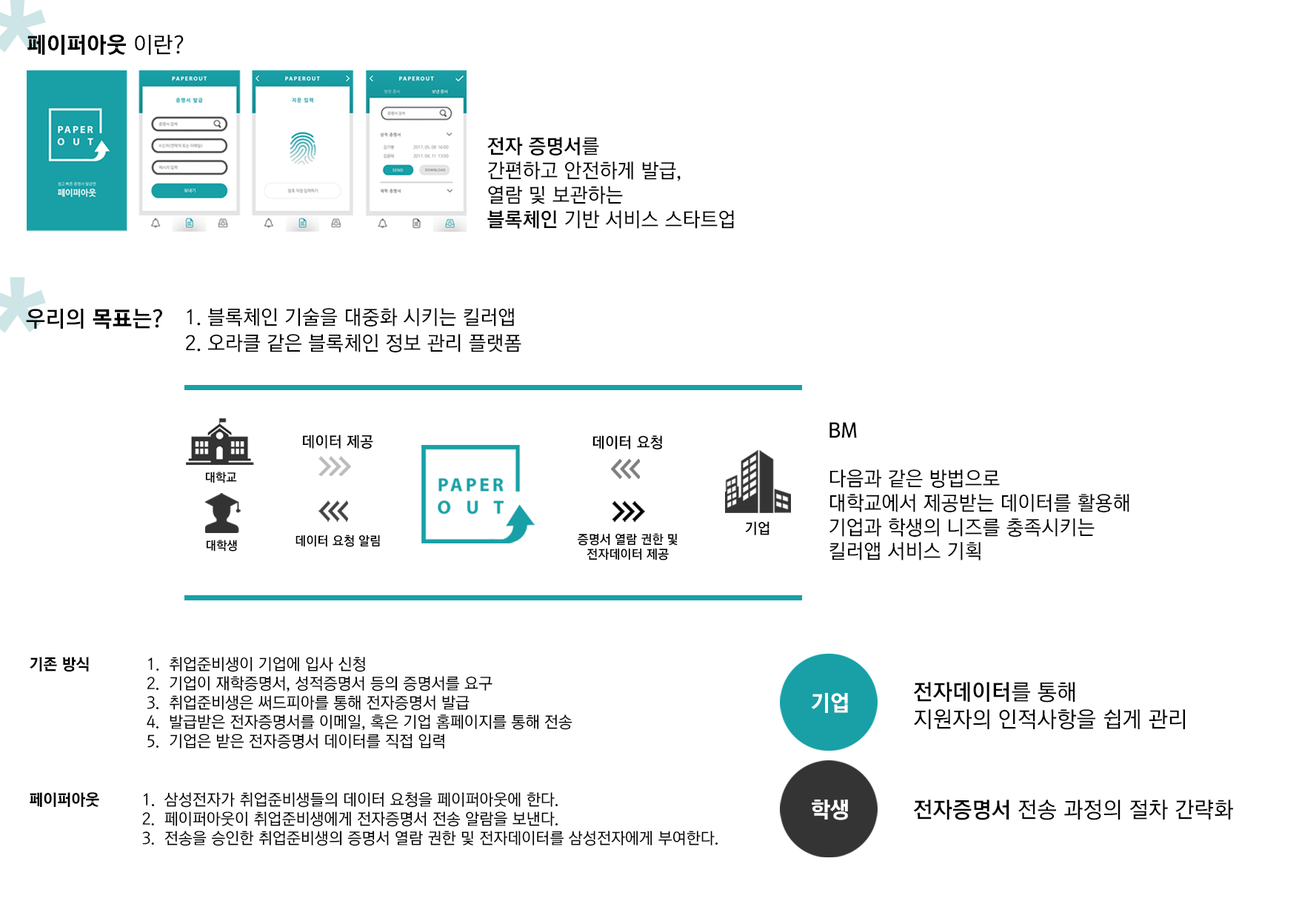
<style>
.page{position:relative;width:1299px;height:918px;background:#ffffff}
.page>*{position:absolute;margin:0}
.t1{font:22.4px "KoreanGD17-R";color:#000000}
.t2{font:22.4px "KoreanGD13-R";color:#000000}
.t3{font:20.2px "KoreanGD13-R";color:#000000}
.t4{font:20.2px "KoreanGD15-R";color:#000000}
.t5{font:22.4px "KoreanGD15-R";color:#000000}
.t6{font:20.2px/25.8px "KoreanGD13-R";letter-spacing:0.002em;color:#000000}
.t7{font:15.2px "KoreanGD15-R";color:#000000}
.t8{font:12.3px "KoreanGD15-R";color:#000000}
.t9{font:14.8px "KoreanGD15-R";color:#000000}
.t10{font:12.8px "KoreanGD15-R";color:#000000}
.t11{font:16px "KoreanGD13-R";color:#000000}
.t12{font:16px "KoreanGD17-R";color:#000000}
.t13{font:22.3px "KoreanGD13-R";color:#000000}
.t14{font:22.3px "KoreanGD15-R";color:#000000}
.t15{font:22.3px "KoreanGD17-R";color:#ffffff}
</style>
<div class="page">
<p class="t1" style="left:27px;top:34px;width:157px;height:21px">페이퍼아웃<span class="t2"> 이란?</span></p>
<p class="t3" style="left:487px;top:137px;width:247px;height:92px"><span class="t4">전자 증명서</span>를<br>간편하고 안전하게 발급,<br>열람 및 보관하는<br><span class="t4">블록체인 </span>기반 서비스 스타트업</p>
<p class="t5" style="left:26px;top:309px;width:136px;height:20px">우리의 <span class="t1">목표</span>는?</p>
<p class="t6" style="left:185px;top:308px;width:336px;height:44px">1. 블록체인 기술을 대중화 시키는 킬러앱<br>2. 오라클 같은 블록체인 정보 관리 플랫폼</p>
<p class="t3" style="left:829px;top:422px;width:300px;height:139px"><span class="t4">BM<br><br></span>다음과 같은 방법으로<br>대학교에서 제공받는 데이터를 활용해<br>기업과 학생의 니즈를 충족시키는<br>킬러앱 서비스 기획</p>
<p class="t7" style="left:303px;top:435px;width:70px;height:14px">데이터 제공</p>
<p class="t7" style="left:592px;top:435px;width:70px;height:14px">데이터 요청</p>
<p class="t8" style="left:205px;top:472px;width:32px;height:12px">대학교</p>
<p class="t9" style="left:745px;top:521px;width:24px;height:14px">기업</p>
<p class="t10" style="left:577px;top:533px;width:101px;height:28px;text-align:center">증명서 열람 권한 및<br>전자데이터 제공</p>
<p class="t8" style="left:206px;top:540px;width:31px;height:12px">대학생</p>
<p class="t10" style="left:295px;top:535px;width:85px;height:12px">데이터 요청 알림</p>
<p class="t11" style="left:30px;top:657px;width:542px;height:92px"><span class="t12">기존 방식 </span>           1.  취업준비생이 기업에 입사 신청<br>                         2.  기업이 재학증명서, 성적증명서 등의 증명서를 요구<br>                         3.  취업준비생은 써드피아를 통해 전자증명서 발급<br>                         4.  발급받은 전자증명서를 이메일, 혹은 기업 홈페이지를 통해 전송<br>                         5.  기업은 받은 전자증명서 데이터를 직접 입력</p>
<p class="t13" style="left:913px;top:682px;width:272px;height:48px"><span class="t14">전자데이터</span>를 통해<br>지원자의 인적사항을 쉽게 관리</p>
<p class="t15" style="left:811px;top:693px;width:37px;height:20px">기업</p>
<p class="t11" style="left:30px;top:792px;width:688px;height:54px"><span class="t12">페이퍼아웃</span>         1.  삼성전자가 취업준비생들의 데이터 요청을 페이퍼아웃에 한다.<br>                        2.  페이퍼아웃이 취업준비생에게 전자증명서 전송 알람을 보낸다.<br>                        3.  전송을 승인한 취업준비생의 증명서 열람 권한 및 전자데이터를 삼성전자에게 부여한다.</p>
<p class="t15" style="left:812px;top:800px;width:36px;height:20px">학생</p>
<p class="t13" style="left:913px;top:800px;width:320px;height:20px"><span class="t14">전자증명서 </span>전송 과정의 절차 간략화</p>
</div>
